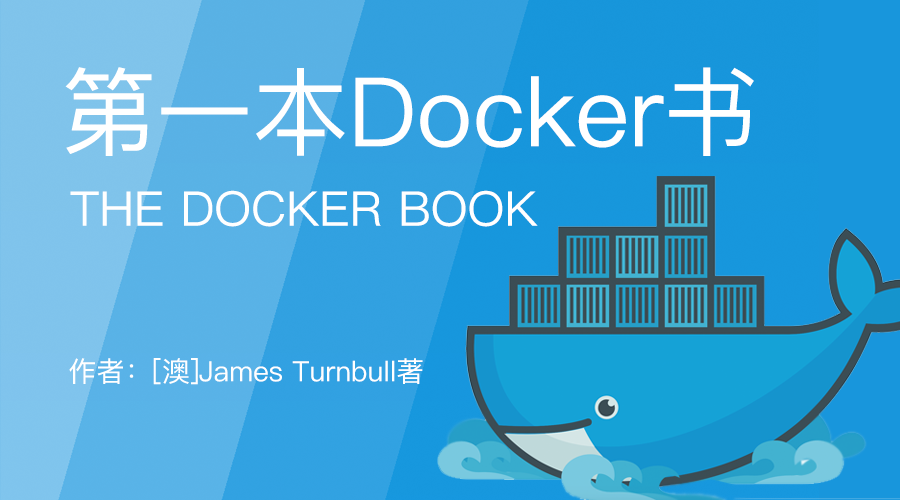
<style>
.page{position:relative;width:900px;height:500px}
.page>*{position:absolute;margin:0}
.t1{font:96px "PingFangSC-Regular";color:#ffffff}
.t2{font:48px "PingFangSC-Regular";color:#ffffff}
.t3{font:28px "PingFangSC-Regular";color:#ffffff}
</style>
<div class="page">
<p class="t1" style="left:65px;top:67px;width:689px;height:89px">第一本Docker书</p>
<p class="t2" style="left:70px;top:190px;width:468px;height:37px">THE DOCKER BOOK</p>
<p class="t3" style="left:69px;top:358px;width:354px;height:27px">作者：[澳]James Turnbull著</p>
</div>
